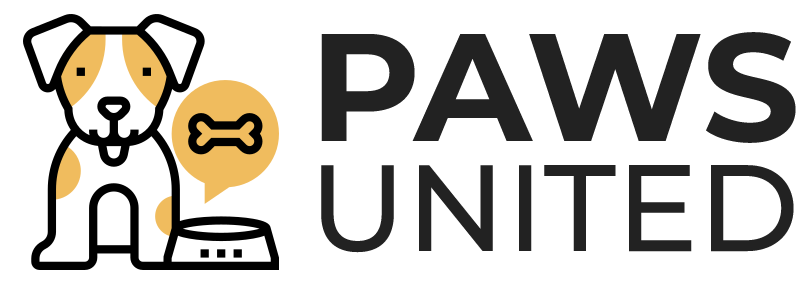
<style>
.page{position:relative;width:800px;height:288px;background:#ffffff}
.page>*{position:absolute;margin:0}
.t1{font:122.6px/101.2px "Montserrat-Medium";color:#222222}
.t2{font:153px/118.1px "Montserrat-Bold";color:#222222}
</style>
<div class="page">
<p class="t1" style="left:321px;top:32px;width:475px;height:221px"><span class="t2">PAWS<br></span>UNITED</p>
</div>
